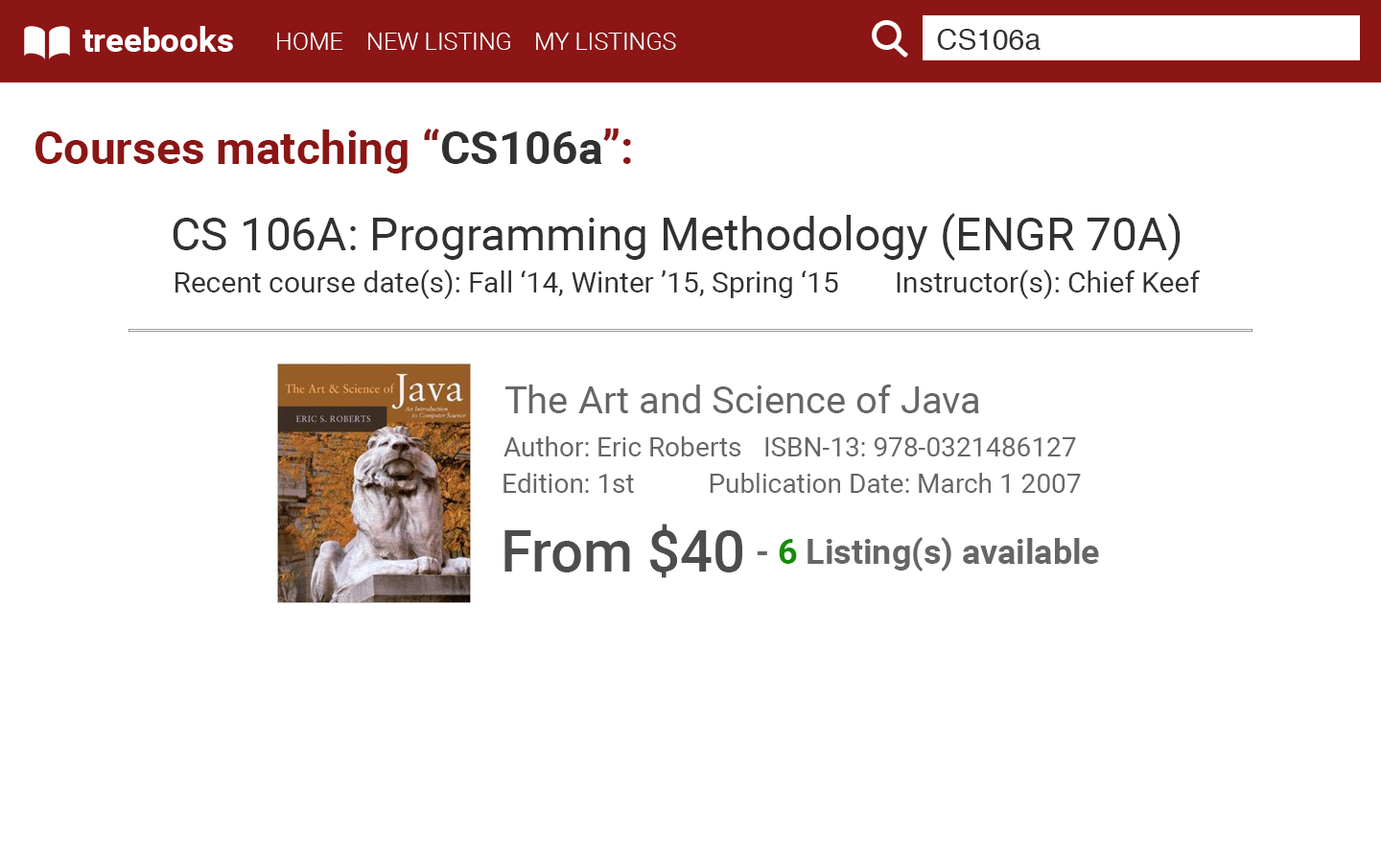
<style>
.page{position:relative;width:1381px;height:863px;background:#ffffff}
.page>*{position:absolute;margin:0}
.t1{font:33.6px "Roboto-Bold";color:#ffffff}
.t2{font:28.8px "Helvetica";color:#313131}
.t3{font:24px "Roboto-Light";color:#ffffff}
.t4{font:46px "Roboto-Bold";color:#8c1515}
.t5{font:46px "Roboto-Bold";color:#313131}
.t6{font:46px "Roboto-Regular";color:#313131}
.t7{font:28.8px "Roboto-Regular";color:#313131}
.t8{font:38.4px "Roboto-Regular";color:#666666}
.t9{font:26.9px "Roboto-Regular";color:#666666}
.t10{font:57.6px "Roboto-Medium";color:#4d4d4d}
.t11{font:34.5px "Roboto-Bold";color:#666666}
.t12{font:34.5px "Roboto-Bold";color:#148e00}
</style>
<div class="page">
<p class="t1" style="left:82px;top:26px;width:151px;height:26px">treebooks</p>
<p class="t2" style="left:937px;top:29px;width:104px;height:21px">CS106a</p>
<p class="t3" style="left:277px;top:33px;width:65px;height:17px">HOME</p>
<p class="t3" style="left:368px;top:33px;width:142px;height:17px">NEW LISTING</p>
<p class="t3" style="left:536px;top:33px;width:140px;height:17px">MY LISTINGS</p>
<p class="t4" style="left:35px;top:129px;width:596px;height:45px">Courses matching “<span class="t5">CS106a</span>”:</p>
<p class="t6" style="left:173px;top:213px;width:1008px;height:48px">CS 106A: Programming Methodology (ENGR 70A)</p>
<p class="t7" style="left:176px;top:270px;width:662px;height:29px">Recent course date(s): Fall ‘14, Winter ’15, Spring ‘15</p>
<p class="t7" style="left:897px;top:270px;width:303px;height:29px">Instructor(s): Chief Keef</p>
<p class="t8" style="left:506px;top:385px;width:473px;height:28px">The Art and Science of Java</p>
<p class="t9" style="left:504px;top:436px;width:237px;height:21px">Author: Eric Roberts</p>
<p class="t9" style="left:765px;top:437px;width:311px;height:20px">ISBN-13: 978-0321486127</p>
<p class="t9" style="left:504px;top:473px;width:130px;height:20px">Edition: 1st</p>
<p class="t9" style="left:710px;top:473px;width:371px;height:20px">Publication Date: March 1 2007</p>
<p class="t10" style="left:505px;top:524px;width:237px;height:54px">From $40</p>
<p class="t11" style="left:757px;top:537px;width:342px;height:35px">- <span class="t12">6</span> Listing(s) available</p>
</div>
